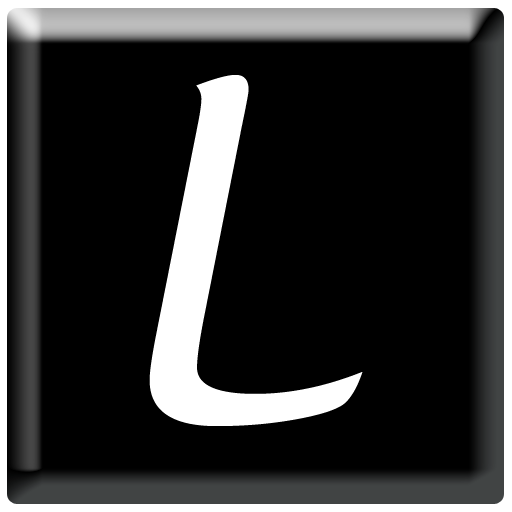
<style>
.page{position:relative;width:512px;height:512px;background:#000000}
.page>*{position:absolute;margin:0}
.t1{font:431px "LucidaHandwriting-Italic";color:#ffffff}
</style>
<div class="page">
<p class="t1" style="left:149px;top:75px;width:214px;height:351px">L</p>
</div>
